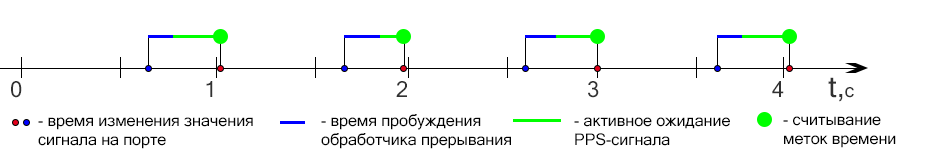
<style>
.page{position:relative;width:926px;height:158px;background:#ffffff}
.page>*{position:absolute;margin:0}
.t1{font:30px "MicrosoftSansSerif";color:#313131}
.t2{font:19px "MicrosoftSansSerif";color:#313131}
.t3{font:22px "MicrosoftSansSerif";color:#313131}
.t4{font:16px "MicrosoftSansSerif";color:#000000}
</style>
<div class="page">
<p class="t1" style="left:828px;top:77px;width:26px;height:25px">t,<span class="t2">c</span></p>
<p class="t3" style="left:11px;top:81px;width:11px;height:17px">0</p>
<p class="t3" style="left:206px;top:81px;width:7px;height:16px">1</p>
<p class="t3" style="left:396px;top:81px;width:11px;height:16px">2</p>
<p class="t3" style="left:588px;top:81px;width:11px;height:17px">3</p>
<p class="t3" style="left:772px;top:81px;width:12px;height:16px">4</p>
<p class="t4" style="left:38px;top:117px;width:215px;height:32px">- время изменения значения<br>сигнала на порте</p>
<p class="t4" style="left:321px;top:114px;width:190px;height:35px">- время пробуждения<br>обработчика прерывания</p>
<p class="t4" style="left:574px;top:117px;width:156px;height:29px">- активное ожидание<br>PPS-сигнала</p>
<p class="t4" style="left:783px;top:116px;width:113px;height:32px">- считывание<br>меток времени</p>
</div>
